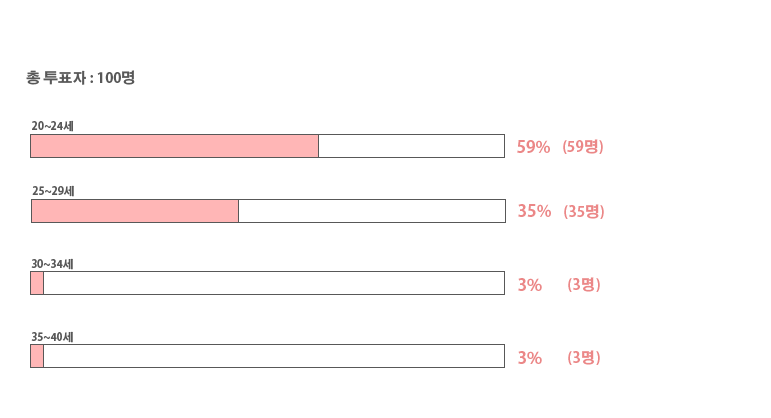
<style>
.page{position:relative;width:771px;height:418px;background:#ffffff}
.page>*{position:absolute;margin:0}
.t1{font:14.4px "AdobeGothicStd-Bold";color:#585858}
.t2{font:10.8px "AdobeGothicStd-Bold";color:#585858}
.t3{font:16.6px "AdobeGothicStd-Bold";color:#eb8787}
.t4{font:14.7px "AdobeGothicStd-Bold";color:#eb8787}
</style>
<div class="page">
<p class="t1" style="left:26px;top:70px;width:109px;height:15px">총 투표자 : 100명</p>
<p class="t2" style="left:32px;top:120px;width:42px;height:12px">20~24세</p>
<p class="t3" style="left:517px;top:140px;width:33px;height:13px">59%</p>
<p class="t4" style="left:563px;top:139px;width:40px;height:15px">(59명)</p>
<p class="t2" style="left:32px;top:185px;width:42px;height:12px">25~29세</p>
<p class="t3" style="left:518px;top:204px;width:33px;height:13px">35%</p>
<p class="t4" style="left:564px;top:204px;width:40px;height:15px">(35명)</p>
<p class="t2" style="left:31px;top:258px;width:42px;height:12px">30~34세</p>
<p class="t3" style="left:518px;top:278px;width:24px;height:13px">3%</p>
<p class="t4" style="left:568px;top:277px;width:32px;height:15px">(3명)</p>
<p class="t2" style="left:31px;top:331px;width:42px;height:12px">35~40세</p>
<p class="t3" style="left:518px;top:351px;width:24px;height:13px">3%</p>
<p class="t4" style="left:568px;top:350px;width:32px;height:15px">(3명)</p>
</div>
